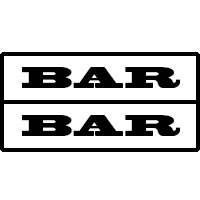
<style>
.page{position:relative;width:200px;height:200px;background:#ffffff}
.page>*{position:absolute;margin:0}
.t1{font:28px "BlackoakStd";color:#000000}
</style>
<div class="page">
<p class="t1" style="left:22px;top:67px;width:158px;height:21px">BAR</p>
</div>
